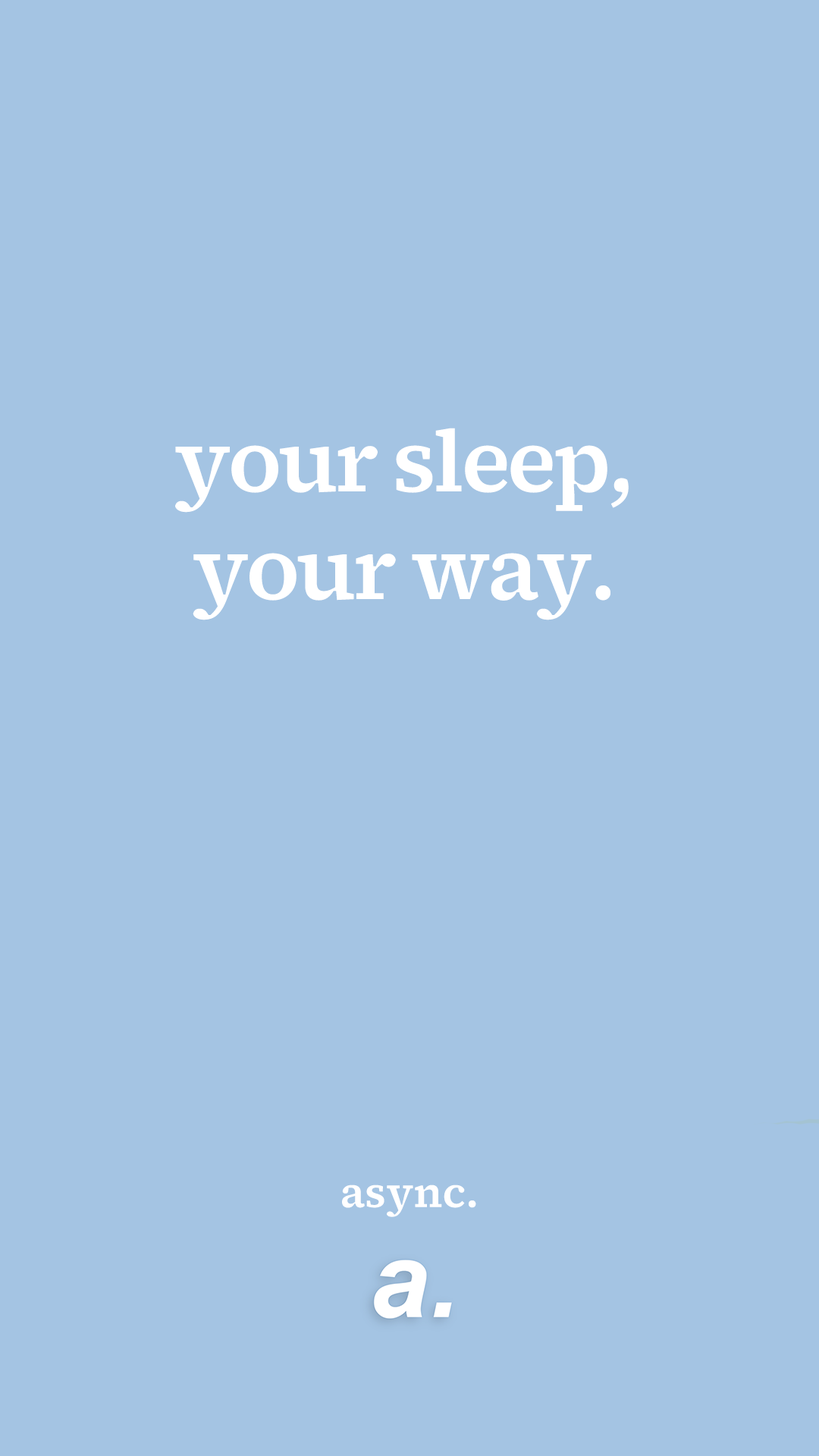
<style>
.page{position:relative;width:819px;height:1456px;background:#a4c4e3}
.page>*{position:absolute;margin:0}
.t1{font:87.2px/107.7px "SourceSerif4Roman-CaptionSemibold";letter-spacing:-0.04em;color:#ffffff}
.t2{font:41.7px "SourceSerif4Roman-CaptionSemibold";color:#ffffff}
</style>
<div class="page">
<p class="t1" style="left:175px;top:428px;width:454px;height:192px;text-align:center">your sleep,<br>your way.</p>
<p class="t2" style="left:342px;top:1185px;width:134px;height:32px">async.</p>
</div>
